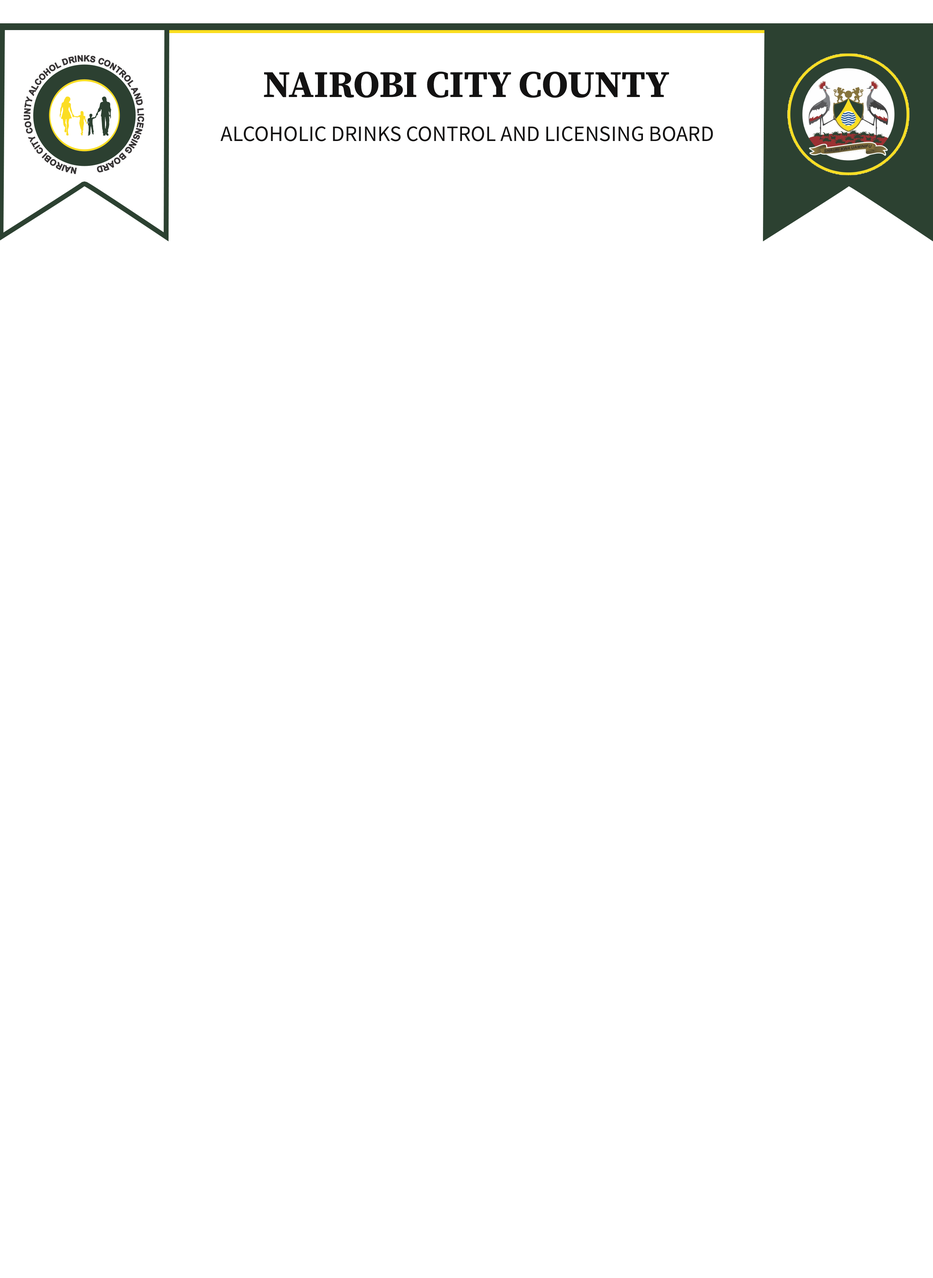
<style>
.page{position:relative;width:933px;height:1278px;background:#ffffff}
.page>*{position:absolute;margin:0}
.t1{font:37.6px "SourceSerifRoman-Bold";color:#131212;text-transform:uppercase}
.t2{font:21.9px "SourceSansPro-Regular";color:#131212;text-transform:uppercase}
</style>
<div class="page">
<p class="t1" style="left:264px;top:71px;width:405px;height:27px">Nairobi City County</p>
<p class="t2" style="left:220px;top:126px;width:493px;height:15px">alcoholic drinks control and licensing board</p>
</div>
